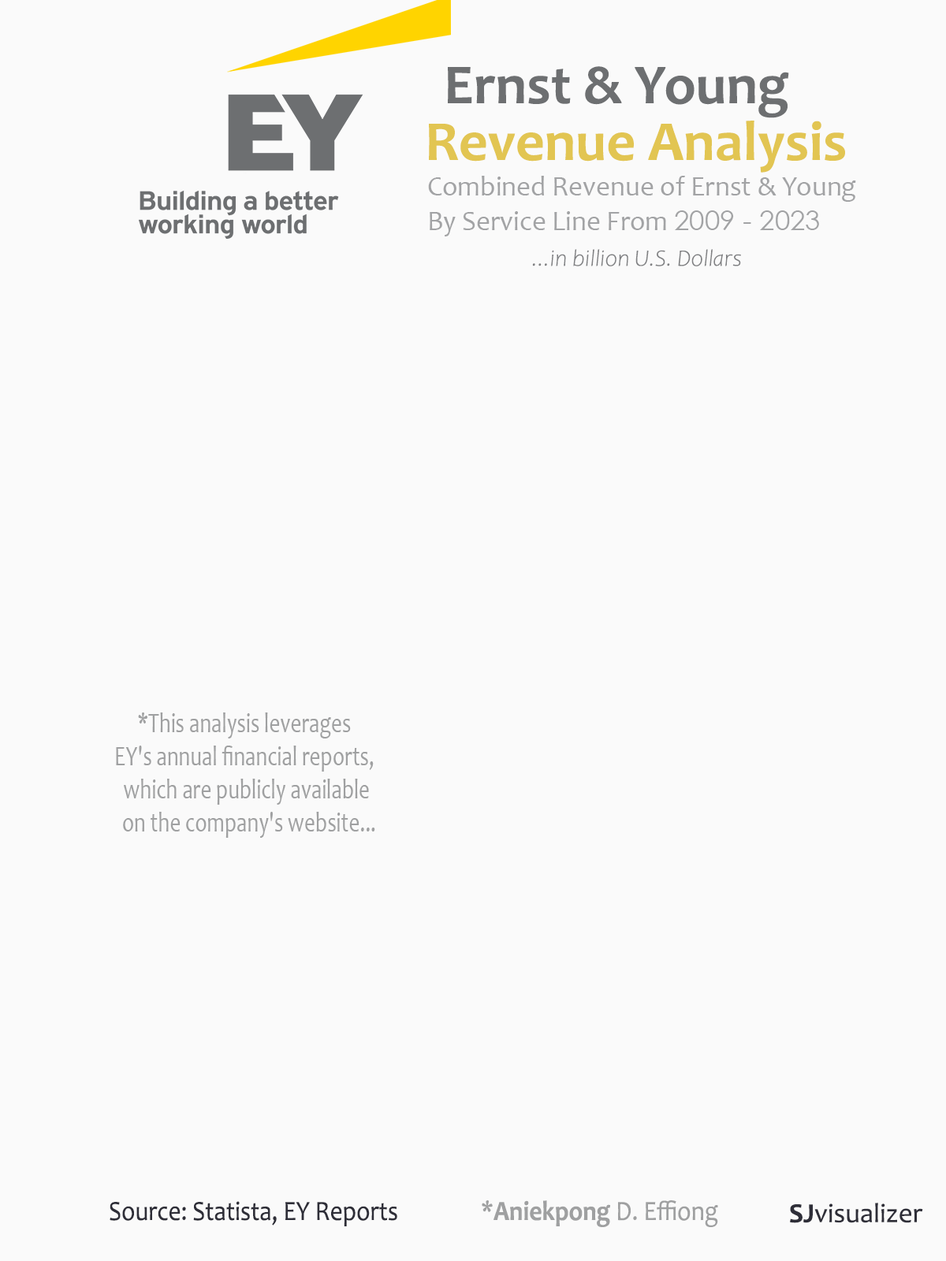
<style>
.page{position:relative;width:946px;height:1261px;background:#fafafa}
.page>*{position:absolute;margin:0}
.t1{font:56.7px "Candara-Bold";color:#6d6f71}
.t2{font:56.7px "Candara-Bold";color:#e2c552}
.t3{font:27.6px "Candara";color:#a2a3a5}
.t4{font:27.6px "CenturyGothic";color:#a2a3a5}
.t5{font:23.6px "Candara-LightItalic";color:#6d6f71}
.t6{font:27.6px "Candara";color:#9fa0a1;scale:0.78 1}
.t7{font:27.9px "Candara";color:#2e2e38;scale:0.89 1}
.t8{font:27.9px "Candara";color:#9fa0a1;scale:0.9 1}
.t9{font:27.9px "Candara-Bold";color:#9fa0a1;scale:0.9 1}
.t10{font:27.6px "Candara";color:#2e2e38}
.t11{font:27.6px "Candara-Bold";color:#2e2e38}
</style>
<div class="page">
<p class="t1" style="left:448px;top:66px;width:341px;height:52px">Ernst &amp; Young</p>
<p class="t2" style="left:429px;top:121px;width:416px;height:52px">Revenue Analysis</p>
<p class="t3" style="left:428px;top:176px;width:428px;height:26px">Combined Revenue of Ernst &amp; Young</p>
<p class="t3" style="left:429px;top:210px;width:390px;height:26px">By Service Line From <span class="t4">2009 - 2023</span></p>
<p class="t5" style="left:532px;top:249px;width:209px;height:17px">...in billion U.S. Dollars</p>
<p class="t6" style="left:116px;top:712px;width:259px;height:126px;text-align:center">*This analysis leverages<br>EY's annual financial reports,<br> which are publicly available<br>  on the company's website...</p>
<p class="t7" style="left:110px;top:1201px;width:287px;height:25px">Source: Statista, EY Reports</p>
<p class="t8" style="left:482px;top:1200px;width:236px;height:27px">*<span class="t9">Aniekpong</span> D. Effiong</p>
<p class="t10" style="left:790px;top:1203px;width:133px;height:20px"><span class="t11">SJ</span>visualizer</p>
</div>
